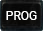
<style>
.page{position:relative;width:43px;height:31px}
.page>*{position:absolute;margin:0}
.t1{font:12px "Roboto-Regular";color:#ffffff}
</style>
<div class="page">
<p class="t1" style="left:6px;top:11px;width:31px;height:9px">PROG</p>
</div>
